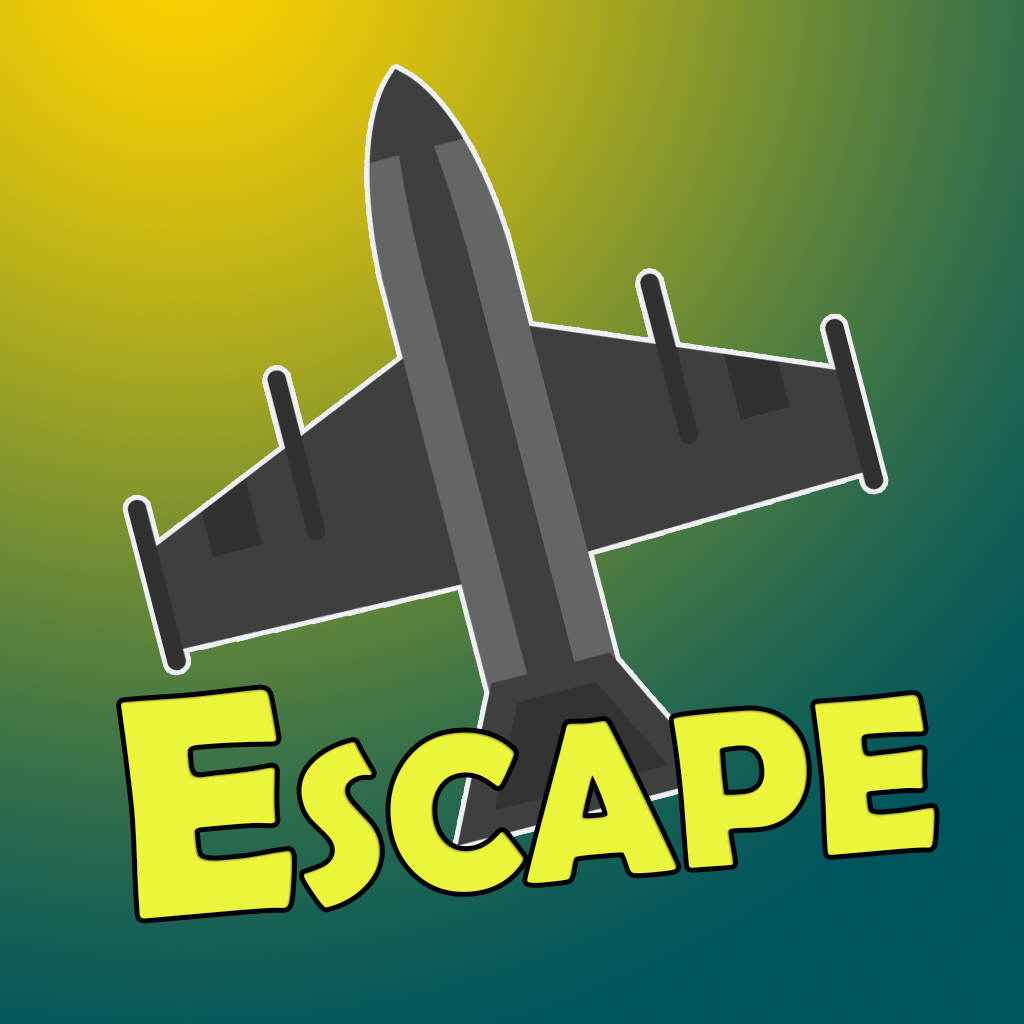
<style>
.page{position:relative;width:1024px;height:1024px}
.page>*{position:absolute;margin:0}
.t1{font:316.7px "BerlinSansFBDemi-Bold";color:#eaf53b;font-variant:small-caps}
</style>
<div class="page">
<p class="t1" style="left:121px;top:689px;width:814px;height:230px;rotate:-5deg">Escape</p>
</div>
